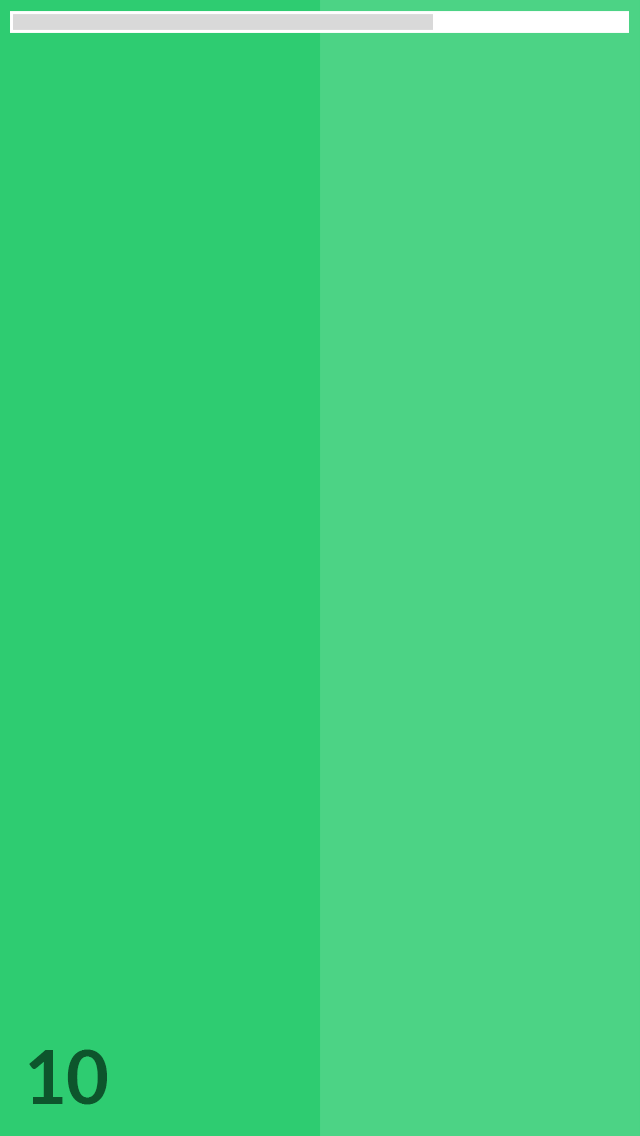
<style>
.page{position:relative;width:640px;height:1136px;background:#4cd385}
.page>*{position:absolute;margin:0}
.t1{font:74.1px "Lato-Bold";color:#0d552c}
</style>
<div class="page">
<p class="t1" style="left:29px;top:1049px;width:78px;height:56px">10</p>
</div>
